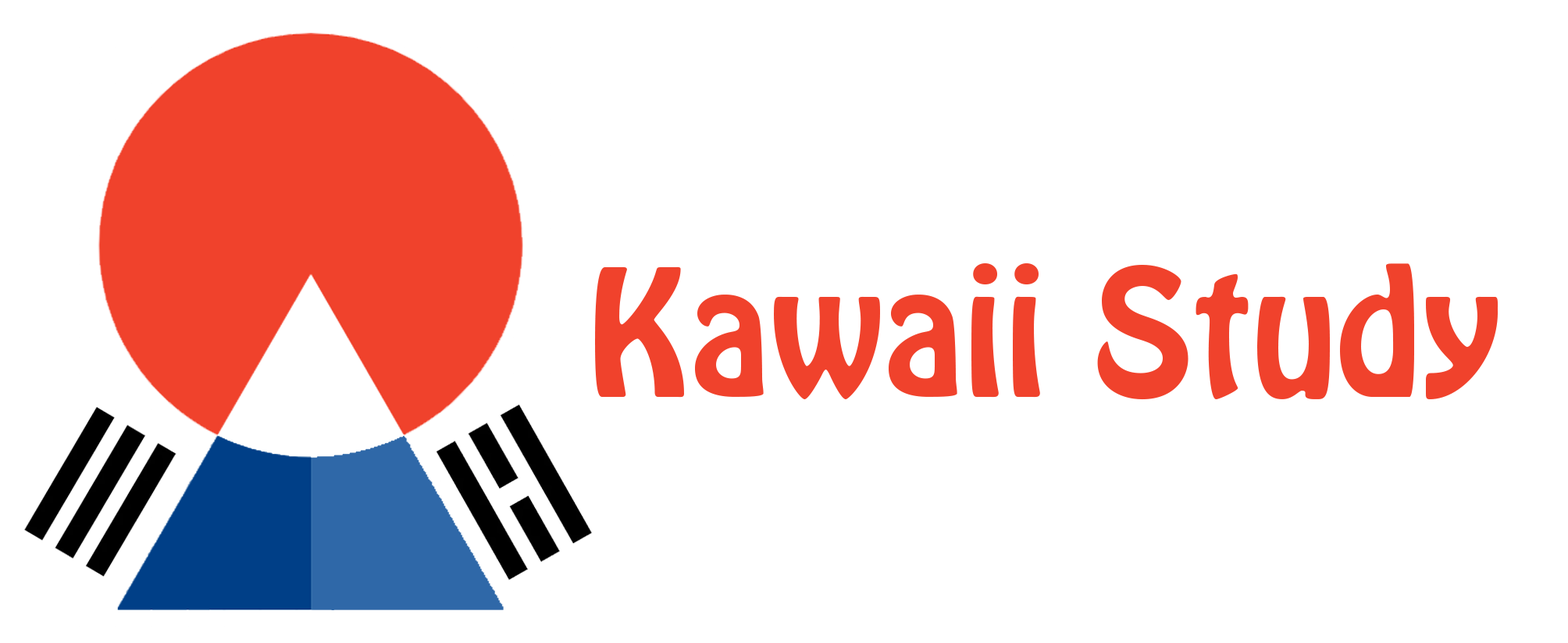
<style>
.page{position:relative;width:1568px;height:643px;background:#ffffff}
.page>*{position:absolute;margin:0}
.t1{font:156.2px "HoboStd";color:#f0422c}
</style>
<div class="page">
<p class="t1" style="left:595px;top:263px;width:904px;height:137px">Kawaii Study</p>
</div>
